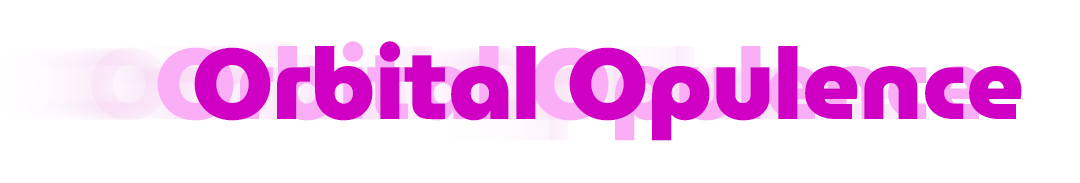
<style>
.page{position:relative;width:1080px;height:183px;background:#ffffff}
.page>*{position:absolute;margin:0}
.t1{font:100px "MuseoModerno-Black"}
.t2{font:100px "MuseoModerno-Black";color:#cf00c3}
</style>
<div class="page">
<p class="t1" style="left:157px;top:41px;width:828px;height:100px">Orbital Opulence</p>
<p class="t2" style="left:194px;top:41px;width:828px;height:100px">Orbital Opulence</p>
</div>
